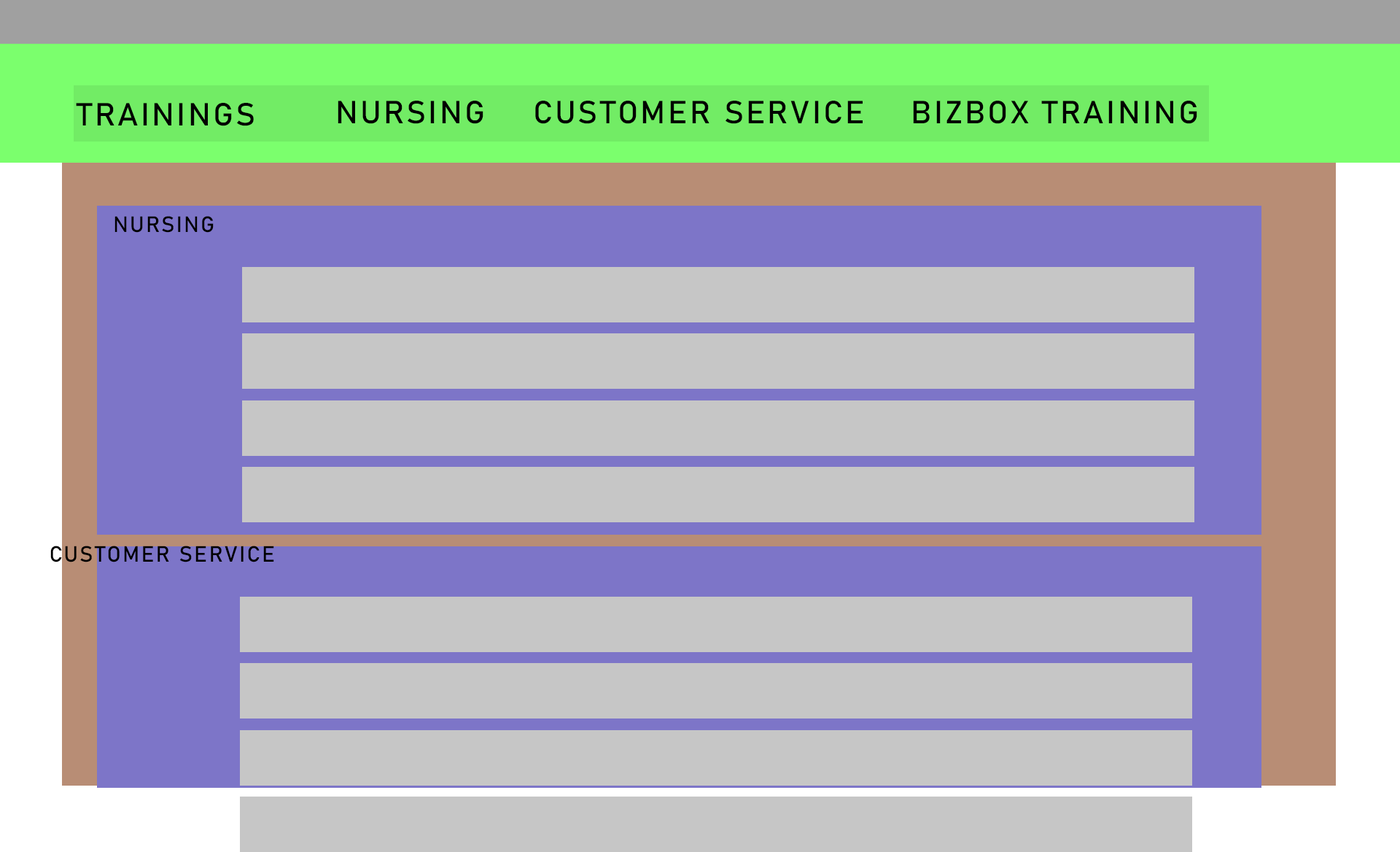
<style>
.page{position:relative;width:1400px;height:852px;background:#c6c6c6}
.page>*{position:absolute;margin:0}
.t1{font:31.6px "Bahnschrift";letter-spacing:0.075em;color:#000000;text-transform:uppercase}
.t2{font:21.9px "Bahnschrift";letter-spacing:0.075em;color:#000000;text-transform:uppercase}
</style>
<div class="page">
<p class="t1" style="left:338px;top:101px;width:145px;height:23px">Nursing</p>
<p class="t1" style="left:535px;top:101px;width:328px;height:23px">Customer service</p>
<p class="t1" style="left:913px;top:101px;width:284px;height:23px">BIZbox TRAINING</p>
<p class="t1" style="left:76px;top:103px;width:178px;height:23px">Trainings</p>
<p class="t2" style="left:114px;top:216px;width:100px;height:17px">nursing</p>
<p class="t2" style="left:50px;top:545px;width:224px;height:17px">CUSTOMER SERVICE</p>
</div>
